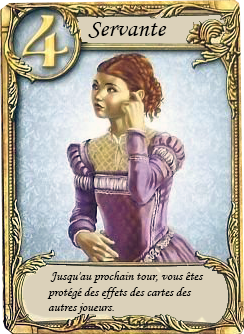
<style>
.page{position:relative;width:244px;height:334px}
.page>*{position:absolute;margin:0}
.t1{font:25px "MonotypeCorsiva";color:#000000}
.t2{font:13px "MonotypeCorsiva";color:#000000}
</style>
<div class="page">
<p class="t1" style="left:88px;top:22px;width:79px;height:16px">Servante</p>
<p class="t2" style="left:47px;top:271px;width:157px;height:43px">Jusqu'au prochain tour, vous êtes <br>protégé des effets des cartes des autres joueurs.</p>
</div>
